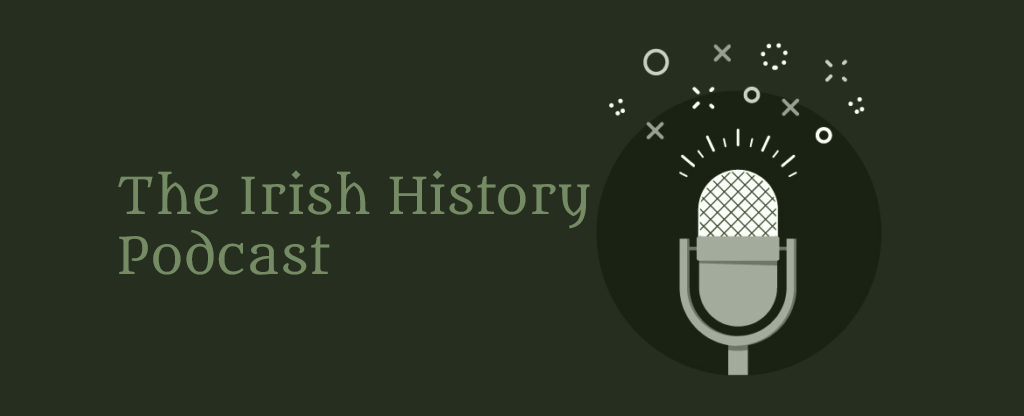
<style>
.page{position:relative;width:1024px;height:416px;background:#262e20}
.page>*{position:absolute;margin:0}
.t1{font:50px "Metamorphous";color:#758b64}
</style>
<div class="page">
<p class="t1" style="left:118px;top:170px;width:472px;height:105px">The Irish History<br>Podcast</p>
</div>
